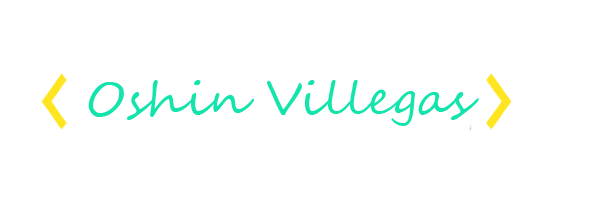
<style>
.page{position:relative;width:600px;height:206px;background:#ffffff}
.page>*{position:absolute;margin:0}
.t1{font:46.3px "SegoeScript";color:#12e4ab;scale:1.07 1}
</style>
<div class="page">
<p class="t1" style="left:88px;top:80px;width:391px;height:46px">Oshin Villegas</p>
</div>
